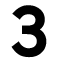
<style>
.page{position:relative;width:64px;height:64px;background:#ffffff}
.page>*{position:absolute;margin:0}
.t1{font:66.7px "(ÇÑ)°¢¸Ó¸®D";color:#000000}
</style>
<div class="page">
<p class="t1" style="left:11px;top:5px;width:36px;height:53px">3</p>
</div>
